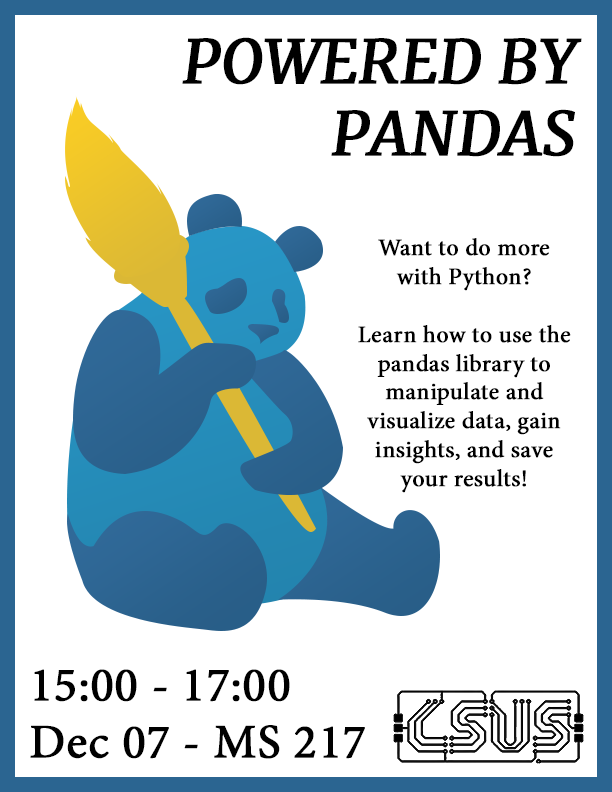
<style>
.page{position:relative;width:612px;height:792px;background:#ffffff}
.page>*{position:absolute;margin:0}
.t1{font:60px "Merriweather-Italic";color:#000000;font-weight:bold}
.t2{font:24px "MinionPro-Regular";color:#000000;font-weight:bold}
.t3{font:48px "MinionPro-Regular";color:#000000;font-weight:bold}
</style>
<div class="page">
<p class="t1" style="left:182px;top:37px;width:400px;height:120px;text-align:right">POWERED BY PANDAS</p>
<p class="t2" style="left:358px;top:238px;width:213px;height:255px;text-align:center">Want to do more <br>with Python?<br><br>Learn how to use the pandas library to <br>manipulate and <br>visualize data, gain <br>insights, and save <br>your results!</p>
<p class="t3" style="left:30px;top:669px;width:335px;height:90px">15:00 - 17:00<br>Dec 07 - MS 217</p>
</div>
